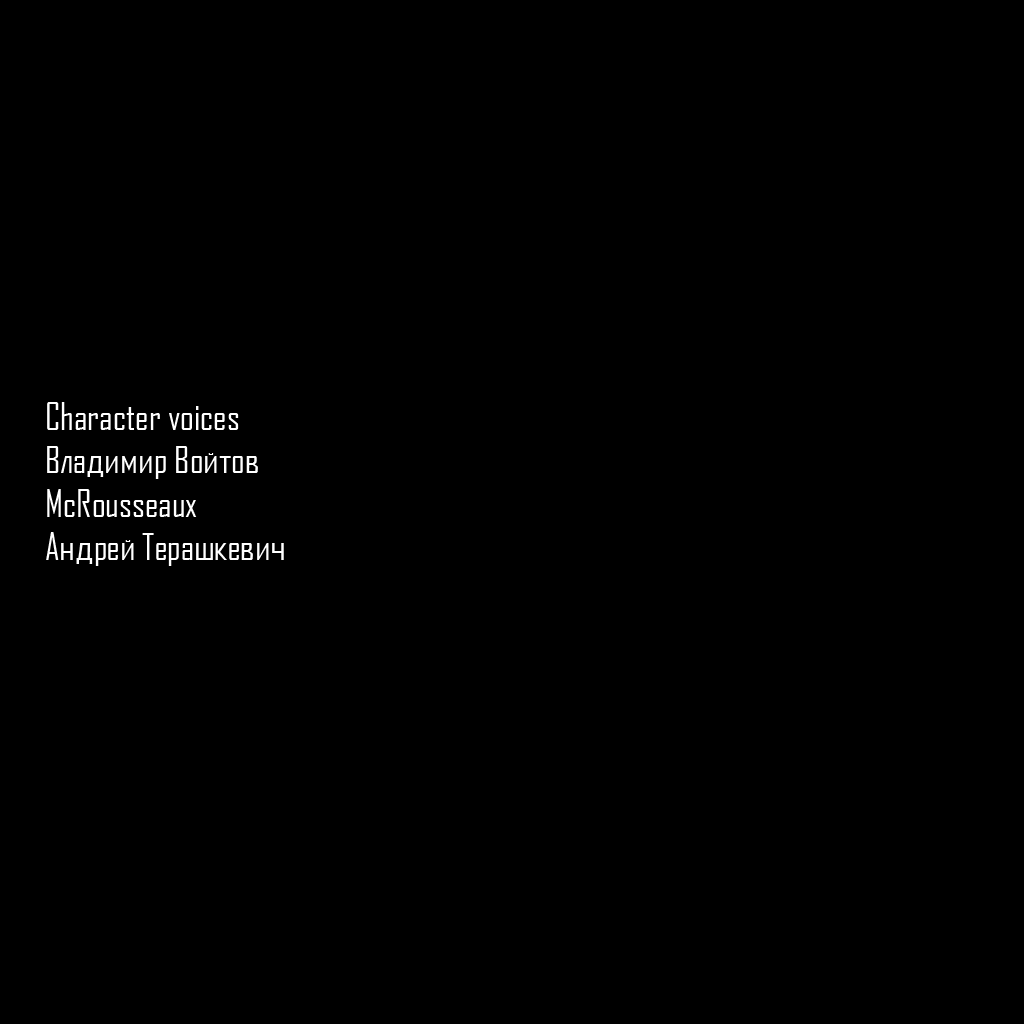
<style>
.page{position:relative;width:1024px;height:1024px;background:#000000}
.page>*{position:absolute;margin:0}
.t1{font:36px "AgencyFBCyrillic";color:#ffffff}
</style>
<div class="page">
<p class="t1" style="left:46px;top:402px;width:238px;height:164px">Character voices<br>Владимир Войтов<br>McRousseaux<br>Андрей Терашкевич</p>
</div>
